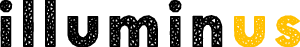
<style>
.page{position:relative;width:300px;height:47px;background:#ffffff}
.page>*{position:absolute;margin:0}
.t1{font:58.6px "Aroly";color:#000000;font-weight:bold}
.t2{font:58.6px "Aroly";color:#ffc000;font-weight:bold}
</style>
<div class="page">
<p class="t1" style="left:0px;top:0px;width:301px;height:48px">illumin<span class="t2">us</span></p>
</div>
